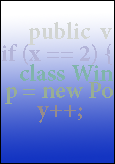
<style>
.page{position:relative;width:115px;height:164px}
.page>*{position:absolute;margin:0}
.t1{font:24px "MinionPro-Bold";color:#d2d5d2}
.t2{font:24px "MinionPro-Bold";color:#b3b4d8}
.t3{font:24px "MinionPro-Bold";color:#80b4ab}
.t4{font:24px "MinionPro-Bold";color:#98ae95}
.t5{font:24px "MinionPro-Bold";color:#968c8c}
</style>
<div class="page">
<p class="t1" style="left:28px;top:22px;width:84px;height:23px">public  v</p>
<p class="t2" style="left:2px;top:44px;width:110px;height:21px">if (x == 2) {</p>
<p class="t3" style="left:20px;top:64px;width:93px;height:17px">class Win</p>
<p class="t4" style="left:5px;top:82px;width:108px;height:22px">p = new Po</p>
<p class="t5" style="left:37px;top:105px;width:45px;height:18px">y++;</p>
</div>
